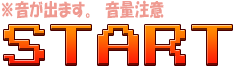
<style>
.page{position:relative;width:236px;height:69px;background:#ffffff}
.page>*{position:absolute;margin:0}
.t1{font:18px "HGPSoeiKakupoptai";letter-spacing:0.025em;color:#ef9a91;scale:0.8 1}
</style>
<div class="page">
<p class="t1" style="left:1px;top:0px;width:163px;height:19px">※音が出ます。　音量注意</p>
</div>
